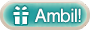
<style>
.page{position:relative;width:90px;height:30px}
.page>*{position:absolute;margin:0}
.t1{font:18px "FutoGoB101Pr5-Bold";letter-spacing:-0.04em;color:#ffffff}
</style>
<div class="page">
<p class="t1" style="left:34px;top:8px;width:47px;height:15px">Ambil!</p>
</div>
